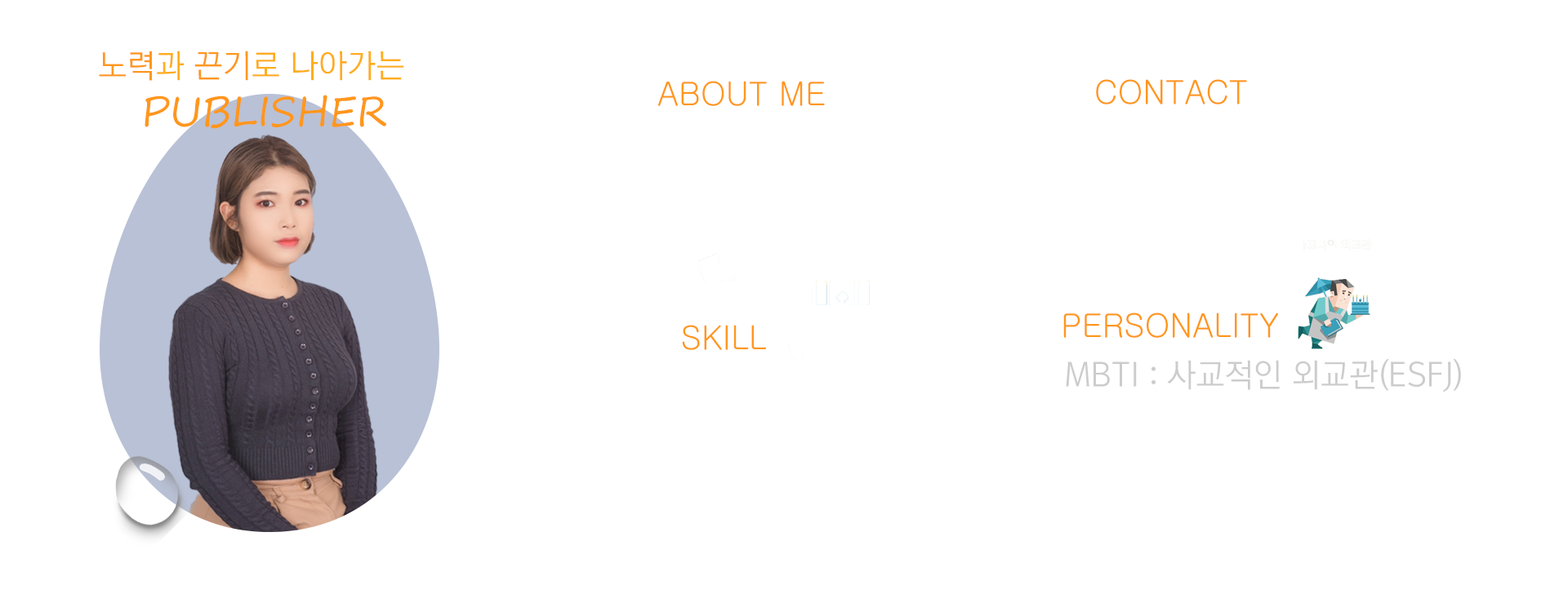
<style>
.page{position:relative;width:1568px;height:612px;background:#ffffff}
.page>*{position:absolute;margin:0}
.t1{font:32.7px "KoreanGD12-R";color:#ffad1d;text-transform:uppercase}
.t2{font:32.7px "KoreanGD12-R";color:#ff971d;text-transform:uppercase}
.t3{font:32.7px "Gulim";color:#ff971d;text-transform:uppercase}
.t4{font:40.8px "SegoePrint";color:#ff971d;text-transform:uppercase}
.t5{font:32.7px "KoreanGD12-R";color:#cccccc;text-transform:uppercase}
</style>
<div class="page">
<p class="t1" style="left:99px;top:51px;width:305px;height:30px"><span class="t2">노력</span>과 <span class="t2">끈기</span>로 나아가는</p>
<p class="t3" style="left:657px;top:81px;width:168px;height:25px">ABOUT ME</p>
<p class="t3" style="left:1096px;top:79px;width:151px;height:26px">CONTACT</p>
<p class="t4" style="left:145px;top:95px;width:241px;height:34px">publisher</p>
<p class="t3" style="left:1063px;top:313px;width:215px;height:25px">PERSONALITY</p>
<p class="t3" style="left:682px;top:325px;width:84px;height:25px">SKILL</p>
<p class="t5" style="left:1066px;top:359px;width:395px;height:33px">MBTI : 사교적인 외교관(ESFJ)</p>
</div>
